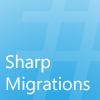
<style>
.page{position:relative;width:100px;height:100px}
.page>*{position:absolute;margin:0}
.t1{font:18px "SegoeWP";color:#ffffff}
</style>
<div class="page">
<p class="t1" style="left:5px;top:54px;width:85px;height:41px">Sharp<br>Migrations</p>
</div>
